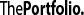
<style>
.page{position:relative;width:84px;height:15px;background:#ffffff}
.page>*{position:absolute;margin:0}
.t1{font:19.9px "MyriadPro-Bold";color:#000000;scale:0.74 1}
.t2{font:19.9px "MyriadPro-Regular";color:#000000;scale:0.74 1}
</style>
<div class="page">
<p class="t1" style="left:0px;top:0px;width:84px;height:15px"><span class="t2">The</span>Portfolio.</p>
</div>
